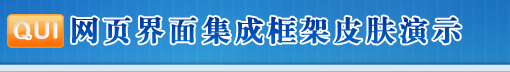
<style>
.page{position:relative;width:510px;height:72px}
.page>*{position:absolute;margin:0}
.t1{font:28px "FZXBSJW--GB1-0";letter-spacing:0.15em;color:#014db2;font-weight:bold}
</style>
<div class="page">
<p class="t1" style="left:72px;top:16px;width:389px;height:28px">网页界面集成框架皮肤演示</p>
</div>
